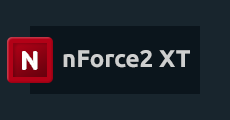
<style>
.page{position:relative;width:230px;height:120px;background:#18252d}
.page>*{position:absolute;margin:0}
.t1{font:24px "Ubuntu-Bold";color:#cecfcf}
</style>
<div class="page">
<p class="t1" style="left:63px;top:50px;width:127px;height:18px">nForce2 XT</p>
</div>
